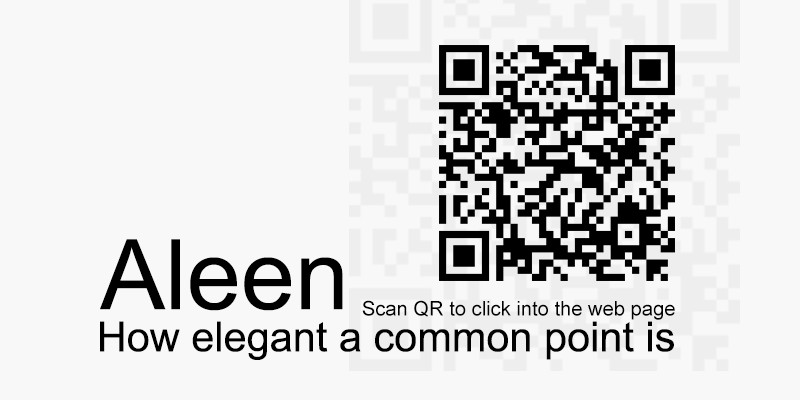
<style>
.page{position:relative;width:800px;height:400px;background:#f8f8f8}
.page>*{position:absolute;margin:0}
.t1{font:97.3px "ArialMT";color:#000000}
.t2{font:20.1px "ArialMT";color:#000000}
.t3{font:41.5px "ArialMT";color:#000000}
</style>
<div class="page">
<p class="t1" style="left:100px;top:239px;width:243px;height:72px">Aleen</p>
<p class="t2" style="left:362px;top:300px;width:313px;height:20px">Scan QR to click into the web page</p>
<p class="t3" style="left:100px;top:321px;width:574px;height:39px">How elegant a common point is</p>
</div>
